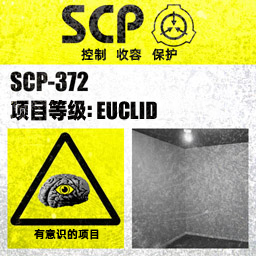
<style>
.page{position:relative;width:256px;height:256px}
.page>*{position:absolute;margin:0}
.t1{font:13px "AlibabaPuHuiTiM"}
.t2{font:26px "URWImpactW01-Bold";letter-spacing:0.02em;color:#000000}
.t3{font:22px "AlibabaPuHuiTiH";letter-spacing:-0.02em;color:#000000;scale:0.9 1}
.t4{font:22px "AlibabaPuHuiTiH";color:#000000;scale:0.9 1}
.t5{font:31px "URWImpactW01-Bold";color:#000000}
.t6{font:11px "AlibabaPuHuiTiM";letter-spacing:0.02em;color:#000000}
</style>
<div class="page">
<p class="t1" style="left:81px;top:48px;width:96px;height:13px">控制   收容   保护</p>
<p class="t2" style="left:10px;top:99px;width:147px;height:22px"><span class="t3">项目等</span><span class="t4">级</span><span class="t5">: </span>EUCLID</p>
<p class="t6" style="left:34px;top:229px;width:65px;height:11px">有意识的项目</p>
</div>
